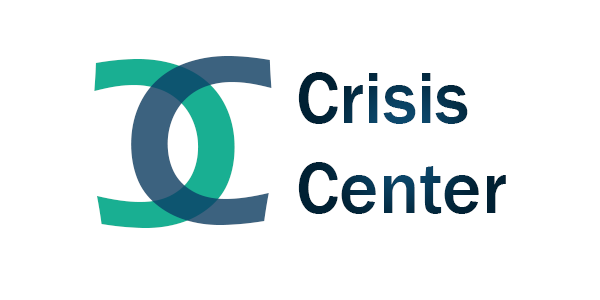
<style>
.page{position:relative;width:600px;height:300px;background:#ffffff}
.page>*{position:absolute;margin:0}
.t1{font:244.7px "ErasITC-Demi";color:#19af92}
.t2{font:244.6px "ErasITC-Demi";color:#3c627f}
.t3{font:75px "FranklinGothic-Medium";color:#032b42}
</style>
<div class="page">
<p class="t1" style="left:94px;top:59px;width:141px;height:169px;rotate:180deg">C</p>
<p class="t2" style="left:131px;top:56px;width:141px;height:169px">C</p>
<p class="t3" style="left:298px;top:72px;width:208px;height:142px">Crisis<br>Center</p>
</div>
